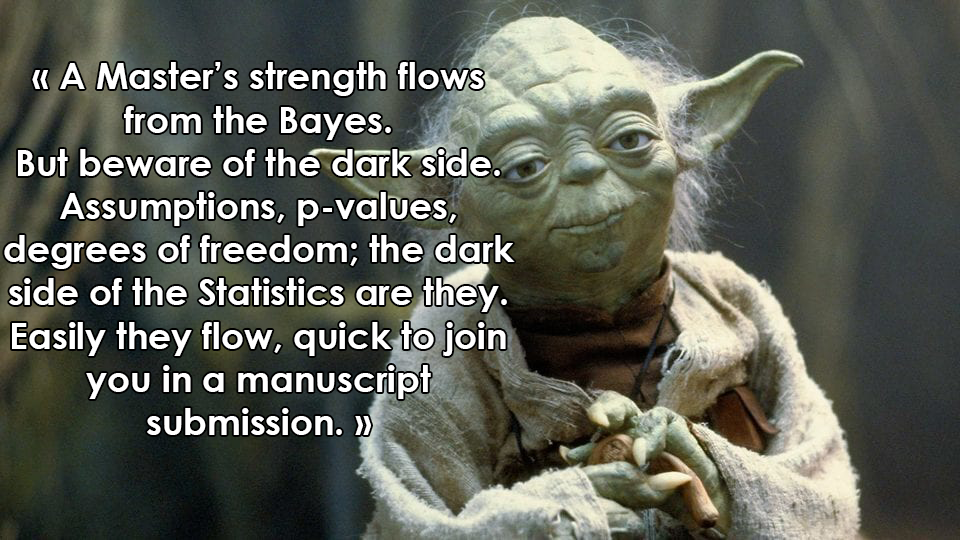
<style>
.page{position:relative;width:960px;height:540px}
.page>*{position:absolute;margin:0}
.t1{font:36px "CenturyGothic-Bold";color:#ffffff}
</style>
<div class="page">
<p class="t1" style="left:4px;top:62px;width:511px;height:373px;text-align:center">« A Master’s strength flows from the Bayes.<br>But beware of the dark side. <br>Assumptions, p-values, <br>degrees of freedom; the dark side of the Statistics are they.<br>Easily they flow, quick to join you in a manuscript <br>submission. »</p>
</div>
